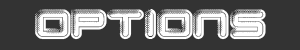
<style>
.page{position:relative;width:300px;height:50px;background:#333333}
.page>*{position:absolute;margin:0}
.t1{font:36px "BumpPad";color:#ffffff}
</style>
<div class="page">
<p class="t1" style="left:34px;top:9px;width:232px;height:31px">OPTIONS</p>
</div>
